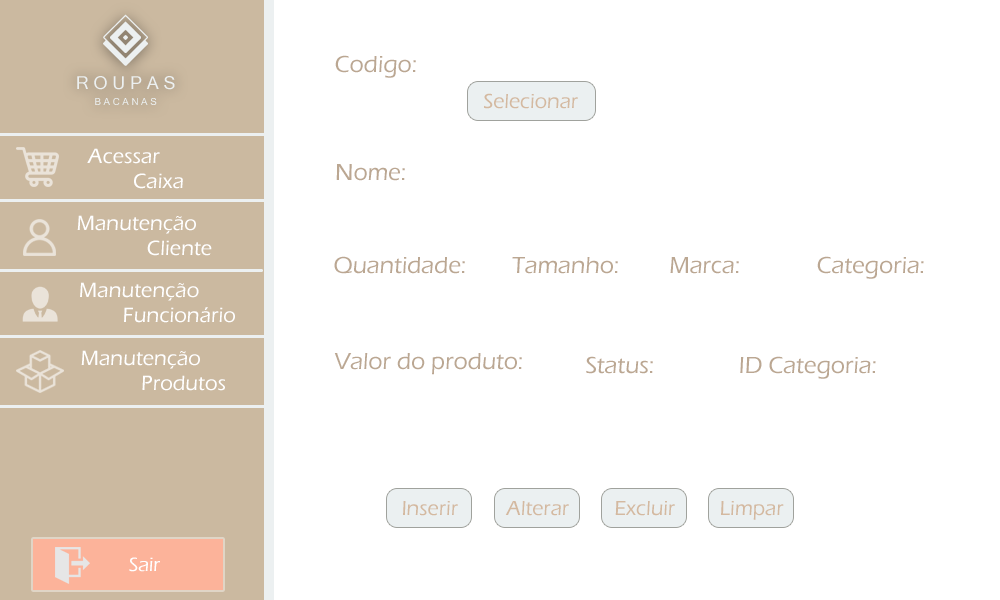
<style>
.page{position:relative;width:1000px;height:600px;background:#ffffff}
.page>*{position:absolute;margin:0}
.t1{font:23.9px "ErasITC-Medium";color:#bba792}
.t2{font:17.8px "MicrosoftSansSerif";color:#ecf0f1}
.t3{font:9.7px "MicrosoftSansSerif";color:#ecf0f1}
.t4{font:20.9px "ErasITC-Medium";color:#d4b9a0}
.t5{font:21.3px "ErasITC-Medium";color:#ffffff}
.t6{font:20px "ErasITC-Medium";color:#ffffff}
</style>
<div class="page">
<p class="t1" style="left:335px;top:55px;width:81px;height:23px">Codigo:</p>
<p class="t2" style="left:77px;top:76px;width:98px;height:14px">R O U P A S</p>
<p class="t3" style="left:95px;top:98px;width:62px;height:7px">B A C A N A S</p>
<p class="t4" style="left:484px;top:93px;width:94px;height:16px">Selecionar</p>
<p class="t5" style="left:87px;top:148px;width:96px;height:41px;text-align:center">Acessar<br>             Caixa</p>
<p class="t1" style="left:336px;top:164px;width:69px;height:17px">Nome:</p>
<p class="t5" style="left:77px;top:215px;width:135px;height:41px;text-align:center">Manutenção<br>                      Cliente</p>
<p class="t1" style="left:334px;top:256px;width:131px;height:18px">Quantidade:</p>
<p class="t1" style="left:512px;top:257px;width:106px;height:17px">Tamanho:</p>
<p class="t1" style="left:670px;top:257px;width:69px;height:17px">Marca:</p>
<p class="t1" style="left:817px;top:256px;width:107px;height:23px">Categoria:</p>
<p class="t5" style="left:80px;top:282px;width:155px;height:41px;text-align:center">Manutenção <br>                       Funcionário</p>
<p class="t5" style="left:81px;top:350px;width:144px;height:41px;text-align:center">Manutenção <br>                         Produtos</p>
<p class="t1" style="left:334px;top:353px;width:188px;height:22px">Valor do produto:</p>
<p class="t1" style="left:586px;top:356px;width:67px;height:18px">Status:</p>
<p class="t1" style="left:740px;top:356px;width:136px;height:23px">ID Categoria:</p>
<p class="t4" style="left:403px;top:501px;width:55px;height:15px">Inserir</p>
<p class="t4" style="left:505px;top:501px;width:64px;height:15px">Alterar</p>
<p class="t4" style="left:615px;top:501px;width:60px;height:15px">Excluir</p>
<p class="t4" style="left:721px;top:501px;width:63px;height:19px">Limpar</p>
<p class="t6" style="left:129px;top:557px;width:31px;height:15px">Sair</p>
</div>
